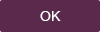
<style>
.page{position:relative;width:100px;height:32px;background:#5b294c}
.page>*{position:absolute;margin:0}
.t1{font:14px "MicrosoftSansSerif";color:#ffffff}
</style>
<div class="page">
<p class="t1" style="left:40px;top:11px;width:21px;height:10px">OK</p>
</div>
